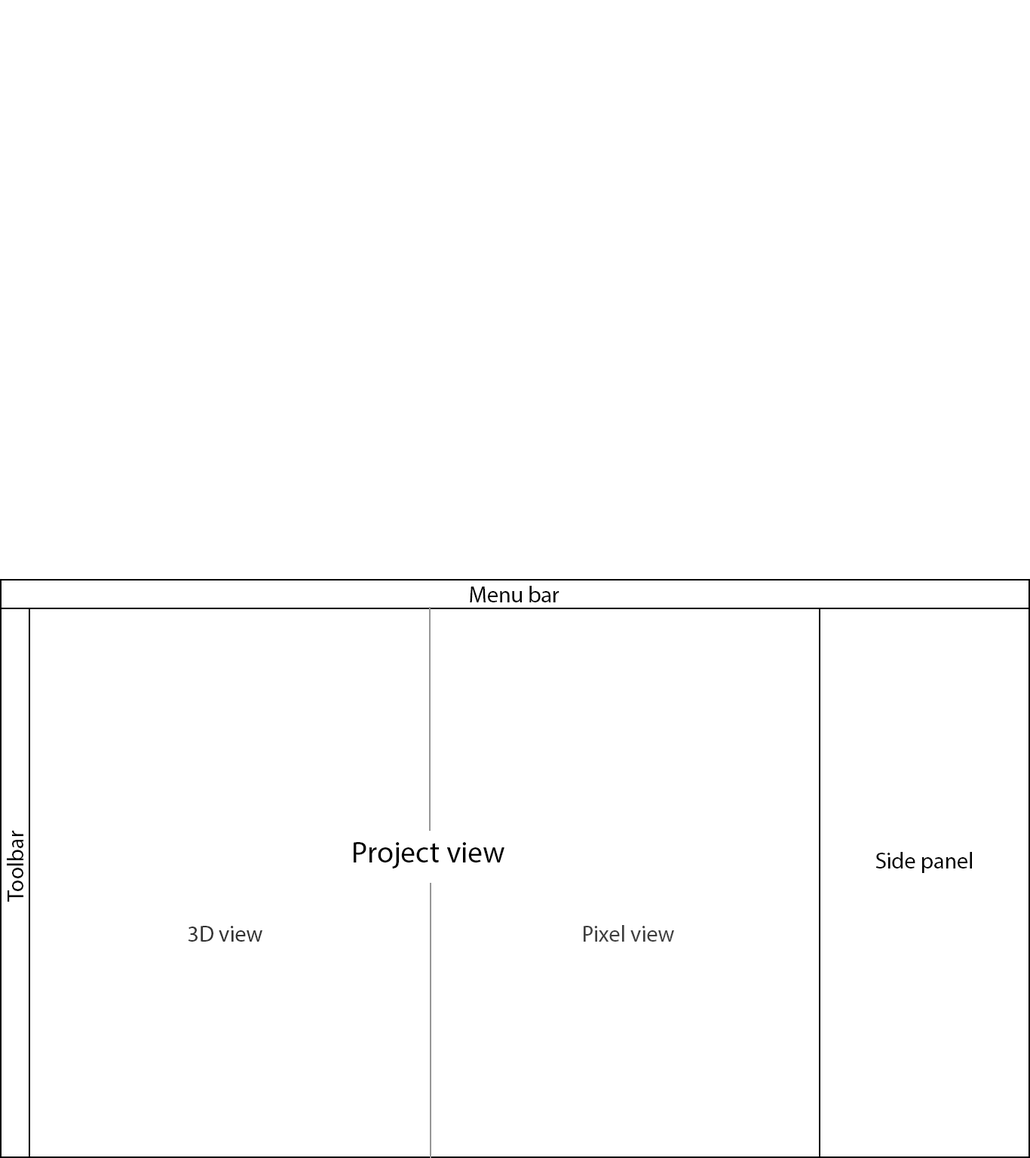
<style>
.page{position:relative;width:1030px;height:1158px;background:#ffffff}
.page>*{position:absolute;margin:0}
.t1{font:22.6px "MyriadPro-Regular";color:#000000}
.t2{font:30.2px "MyriadPro-Regular";color:#000000}
.t3{font:22.6px "MyriadPro-Regular";color:#333333}
.t4{font:22.6px "MyriadPro-Regular";color:#3f3f3f}
</style>
<div class="page">
<p class="t1" style="left:470px;top:586px;width:89px;height:16px">Menu bar</p>
<p class="t1" style="left:7px;top:830px;width:16px;height:72px;rotate:-90deg">Toolbar</p>
<p class="t2" style="left:354px;top:842px;width:150px;height:26px">Project view</p>
<p class="t1" style="left:875px;top:852px;width:97px;height:21px">Side panel</p>
<p class="t3" style="left:188px;top:926px;width:74px;height:16px">3D view</p>
<p class="t4" style="left:583px;top:925px;width:91px;height:17px">Pixel view</p>
</div>
